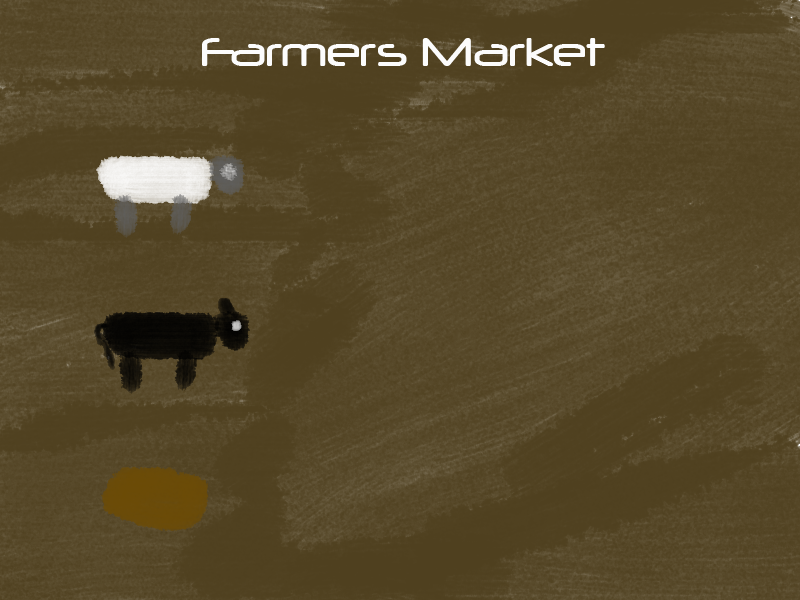
<style>
.page{position:relative;width:800px;height:600px}
.page>*{position:absolute;margin:0}
.t1{font:48px "Neuropol";color:#fcfcfc}
</style>
<div class="page">
<p class="t1" style="left:202px;top:38px;width:403px;height:28px">Farmers Market</p>
</div>
